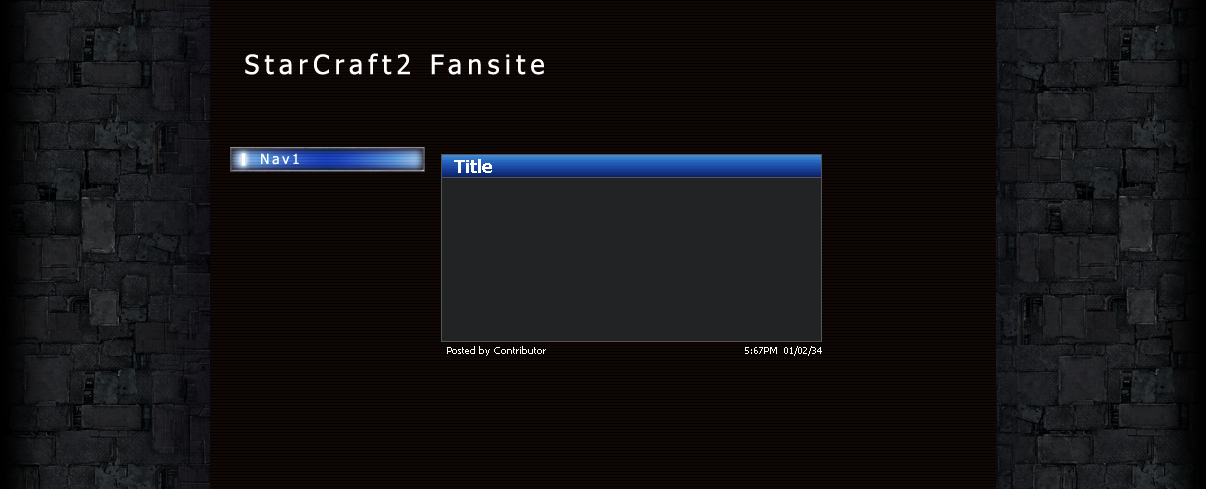
<style>
.page{position:relative;width:1206px;height:489px;background:#110806}
.page>*{position:absolute;margin:0}
.t1{font:26.7px "Tahoma";letter-spacing:0.2em;color:#ffffff}
.t2{font:14px "Tahoma";letter-spacing:0.2em;color:#ffffff}
.t3{font:18px "Tahoma-Bold";color:#ffffff}
.t4{font:10px "Tahoma";color:#ffffff}
</style>
<div class="page">
<p class="t1" style="left:245px;top:53px;width:299px;height:22px">StarCraft2 Fansite</p>
<p class="t2" style="left:261px;top:153px;width:38px;height:12px">Nav1</p>
<p class="t3" style="left:454px;top:159px;width:38px;height:14px">Title</p>
<p class="t4" style="left:447px;top:346px;width:99px;height:10px">Posted by Contributor</p>
<p class="t4" style="left:745px;top:346px;width:77px;height:10px">5:67PM  01/02/34</p>
</div>
